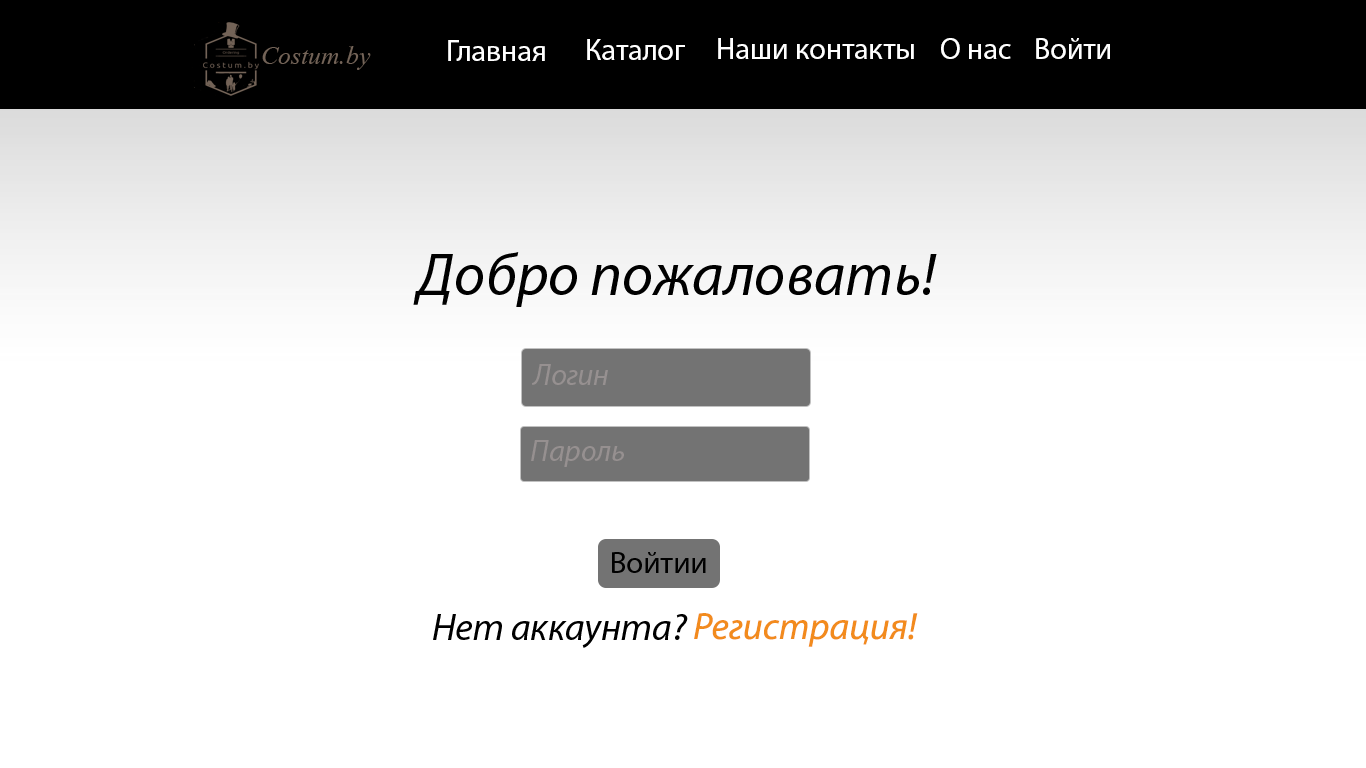
<style>
.page{position:relative;width:1366px;height:768px;background:#ffffff}
.page>*{position:absolute;margin:0}
.t1{font:30px "MyriadPro-Regular";color:#ffffff}
.t2{font:60px "MyriadPro-It";color:#000000}
.t3{font:30px "MyriadPro-It";color:#969090}
.t4{font:30px "MyriadPro-Regular";color:#000000;scale:1.04 1}
.t5{font:38px "MyriadPro-It";color:#000000}
.t6{font:38px "MyriadPro-It";color:#f28b1d}
</style>
<div class="page">
<p class="t1" style="left:448px;top:40px;width:97px;height:21px">Главная</p>
<p class="t1" style="left:587px;top:39px;width:98px;height:21px">Каталог</p>
<p class="t1" style="left:718px;top:38px;width:196px;height:21px">Наши контакты</p>
<p class="t1" style="left:941px;top:38px;width:70px;height:21px">О нас</p>
<p class="t1" style="left:1036px;top:38px;width:74px;height:21px">Войти</p>
<p class="t2" style="left:413px;top:252px;width:524px;height:55px">Добро пожаловать!</p>
<p class="t3" style="left:532px;top:364px;width:76px;height:21px">Логин</p>
<p class="t3" style="left:531px;top:440px;width:93px;height:27px">Пароль</p>
<p class="t4" style="left:612px;top:552px;width:94px;height:21px">Войтии</p>
<p class="t5" style="left:433px;top:614px;width:255px;height:34px">Нет аккаунта?</p>
<p class="t6" style="left:694px;top:613px;width:224px;height:34px">Регистрация!</p>
</div>
